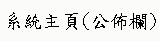
<style>
.page{position:relative;width:160px;height:41px;background:#fbfcf9}
.page>*{position:absolute;margin:0}
.t1{font:19.4px "DFKaiShu-SB-Estd-BF";color:#000000}
</style>
<div class="page">
<p class="t1" style="left:8px;top:12px;width:148px;height:18px">系統主頁(公佈欄)</p>
</div>
